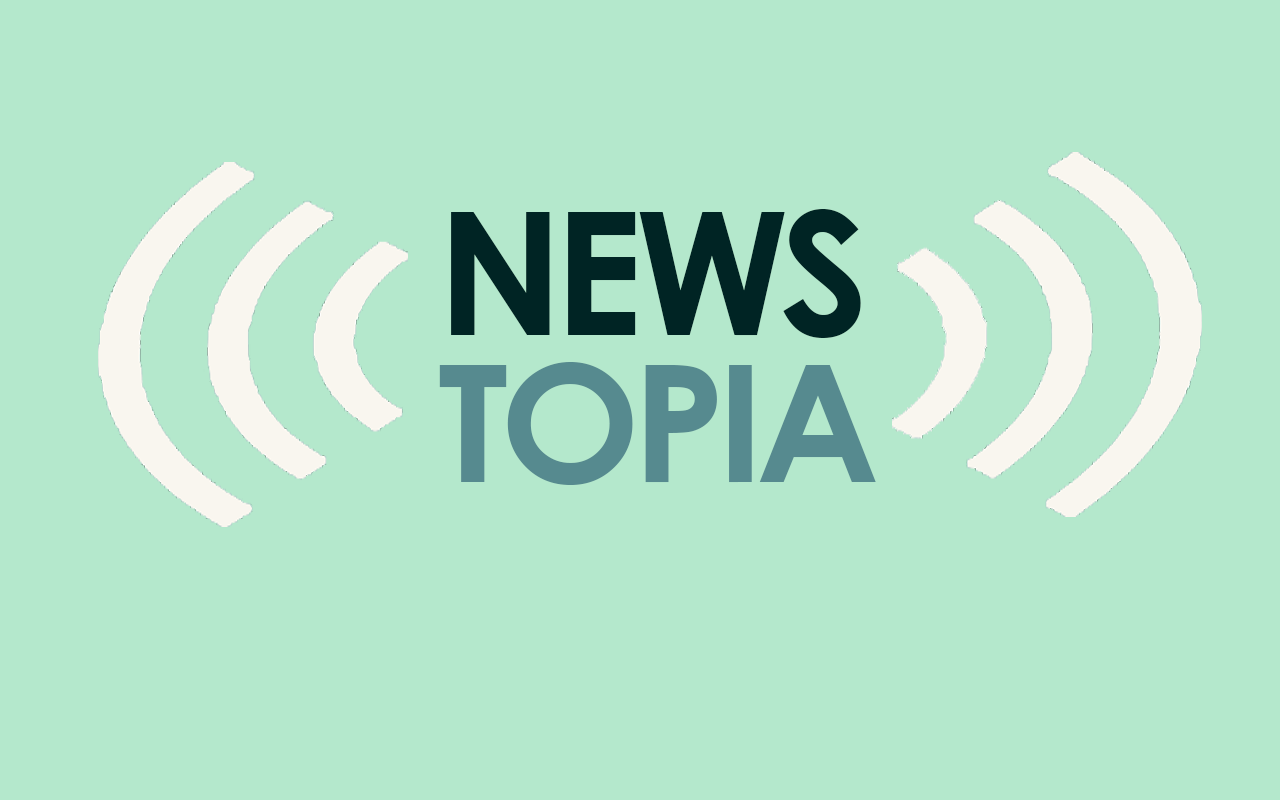
<style>
.page{position:relative;width:1280px;height:800px;background:#b4e8cc}
.page>*{position:absolute;margin:0}
.t1{font:170.9px "CenturyGothic-Bold";letter-spacing:-0.05em;color:#002424}
.t2{font:163px "CenturyGothic-Bold";letter-spacing:-0.05em;color:#568a8f}
</style>
<div class="page">
<p class="t1" style="left:451px;top:209px;width:410px;height:129px">NEWS</p>
<p class="t2" style="left:439px;top:362px;width:437px;height:123px">TOPIA</p>
</div>
